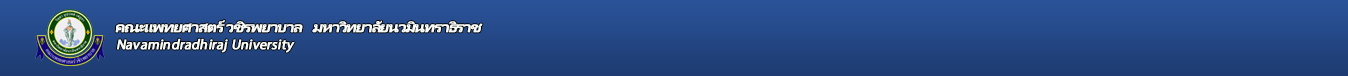
<style>
.page{position:relative;width:1348px;height:76px}
.page>*{position:absolute;margin:0}
.t1{font:15.2px "LeelawadeeUI-Bold";letter-spacing:-0.075em;color:#f9fcf9;font-weight:bold;font-style:italic}
.t2{font:14px "MyriadPro-Regular";color:#f9fcf9;font-weight:bold;font-style:italic}
</style>
<div class="page">
<p class="t1" style="left:115px;top:20px;width:188px;height:13px">คณะแพทยศาสตร์ วชิรพยาบาล</p>
<p class="t1" style="left:312px;top:20px;width:171px;height:13px">มหาวิทยาลัยนวมินทราธิราช</p>
<p class="t2" style="left:117px;top:38px;width:178px;height:15px">Navamindradhiraj University</p>
</div>
